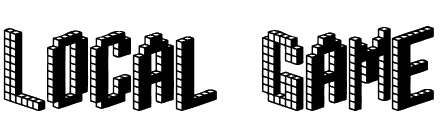
<style>
.page{position:relative;width:440px;height:140px;background:#ffffff}
.page>*{position:absolute;margin:0}
.t1{font:87px "Blox-BRK";color:#000000}
</style>
<div class="page">
<p class="t1" style="left:3px;top:26px;width:431px;height:85px">Local Game</p>
</div>
